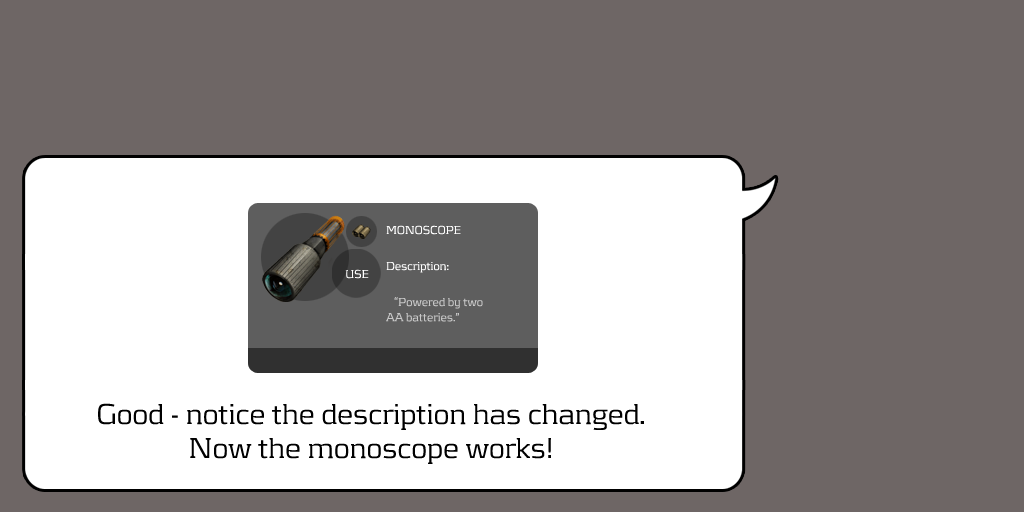
<style>
.page{position:relative;width:1024px;height:512px;background:#6e6665}
.page>*{position:absolute;margin:0}
.t1{font:12px/36px "KontrapunktLight";color:#ffffff}
.t2{font:12px/36px "KontrapunktLight";color:#c9c9c9}
.t3{font:12px/15.2px "KontrapunktLight";color:#c9c9c9}
.t4{font:12px "KontrapunktLight";color:#ffffff}
.t5{font:30px/34px "KontrapunktLight";color:#000000}
</style>
<div class="page">
<p class="t1" style="left:386px;top:225px;width:97px;height:97px">MONOSCOPE<br>Description:<br><span class="t2">   “Powered by two <br></span><span class="t3">AA batteries.”</span></p>
<p class="t4" style="left:345px;top:269px;width:24px;height:10px">USE</p>
<p class="t5" style="left:98px;top:403px;width:546px;height:61px;text-align:center">Good - notice the description has changed. <br>Now the monoscope works!</p>
</div>
